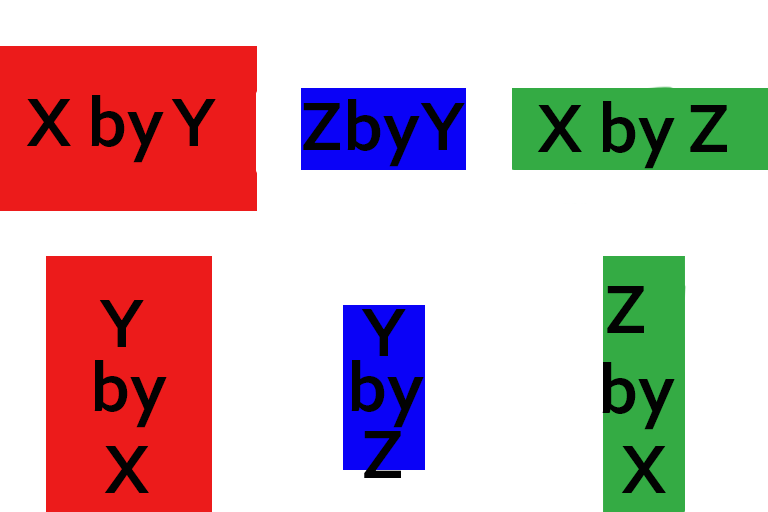
<style>
.page{position:relative;width:768px;height:512px;background:#ffffff}
.page>*{position:absolute;margin:0}
.t1{font:72px "Corbel-Bold";color:#020202}
</style>
<div class="page">
<p class="t1" style="left:26px;top:95px;width:190px;height:68px">X by Y</p>
<p class="t1" style="left:303px;top:99px;width:162px;height:68px">ZbyY</p>
<p class="t1" style="left:537px;top:101px;width:190px;height:68px">X by Z</p>
<p class="t1" style="left:607px;top:286px;width:37px;height:47px">Z</p>
<p class="t1" style="left:99px;top:300px;width:45px;height:47px">Y</p>
<p class="t1" style="left:361px;top:309px;width:45px;height:47px">Y</p>
<p class="t1" style="left:94px;top:360px;width:73px;height:68px">by</p>
<p class="t1" style="left:351px;top:360px;width:73px;height:68px">by</p>
<p class="t1" style="left:602px;top:362px;width:73px;height:68px">by</p>
<p class="t1" style="left:364px;top:431px;width:37px;height:47px">Z</p>
<p class="t1" style="left:104px;top:446px;width:45px;height:47px">X</p>
<p class="t1" style="left:621px;top:446px;width:45px;height:47px">X</p>
</div>
